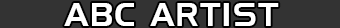
<style>
.page{position:relative;width:340px;height:28px;background:#333333}
.page>*{position:absolute;margin:0}
.t1{font:31.6px "HandelGothicBT-Regular";letter-spacing:0.05em;color:#ffffff}
</style>
<div class="page">
<p class="t1" style="left:64px;top:3px;width:215px;height:23px">ABC ARTIST</p>
</div>
